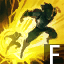
<style>
.page{position:relative;width:64px;height:64px}
.page>*{position:absolute;margin:0}
.t1{font:24px "AdobeFanHeitiStd-Bold";color:#ffffff}
</style>
<div class="page">
<p class="t1" style="left:50px;top:45px;width:10px;height:19px">F</p>
</div>
